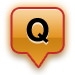
<style>
.page{position:relative;width:75px;height:75px}
.page>*{position:absolute;margin:0}
.t1{font:31.3px "HelveticaNeue-Bold";color:#000000}
</style>
<div class="page">
<p class="t1" style="left:26px;top:18px;width:23px;height:25px">Q</p>
</div>
